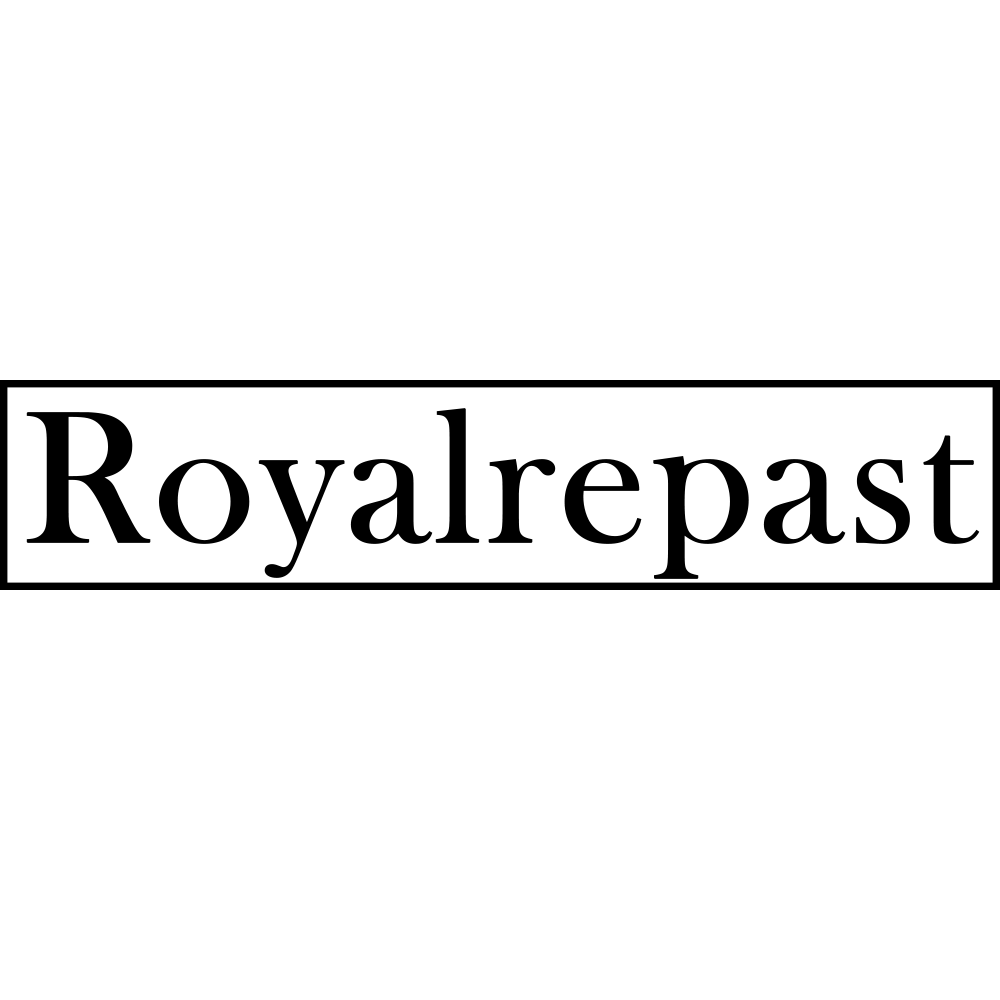
<style>
.page{position:relative;width:1000px;height:1000px;background:#ffffff}
.page>*{position:absolute;margin:0}
.t1{font:194.4px "BaskOldFace";color:#000000;font-weight:bold}
</style>
<div class="page">
<p class="t1" style="left:26px;top:408px;width:954px;height:171px">Royalrepast</p>
</div>
